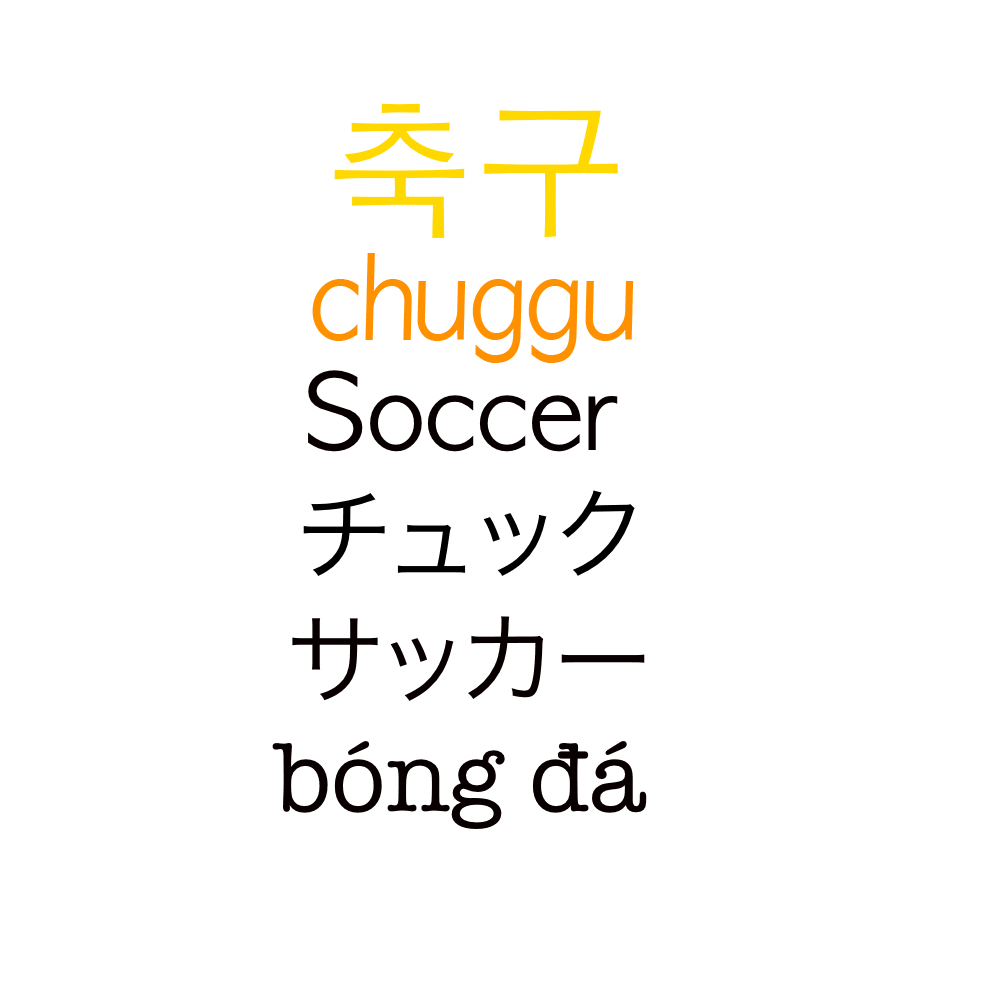
<style>
.page{position:relative;width:1000px;height:1000px;background:#ffffff}
.page>*{position:absolute;margin:0}
.t1{font:150px "AppleGothic";color:#ffd800}
.t2{font:111.2px "AppleGothic";color:#ff9000;scale:0.9 1}
.t3{font:100px "AppleGothic";color:#080000}
.t4{font:100px "HiraKakuProN-W3";color:#000000}
.t5{font:100px "HiraKakuProN-W3";color:#080000}
.t6{font:100px "AmericanTypewriter";color:#080000}
</style>
<div class="page">
<p class="t1" style="left:334px;top:103px;width:284px;height:135px">축구</p>
<p class="t2" style="left:312px;top:253px;width:322px;height:110px">chuggu</p>
<p class="t3" style="left:308px;top:370px;width:310px;height:82px">Soccer</p>
<p class="t4" style="left:303px;top:490px;width:332px;height:86px">チュック</p>
<p class="t5" style="left:292px;top:616px;width:353px;height:85px">サッカー</p>
<p class="t6" style="left:272px;top:741px;width:375px;height:88px">bóng đá</p>
</div>
